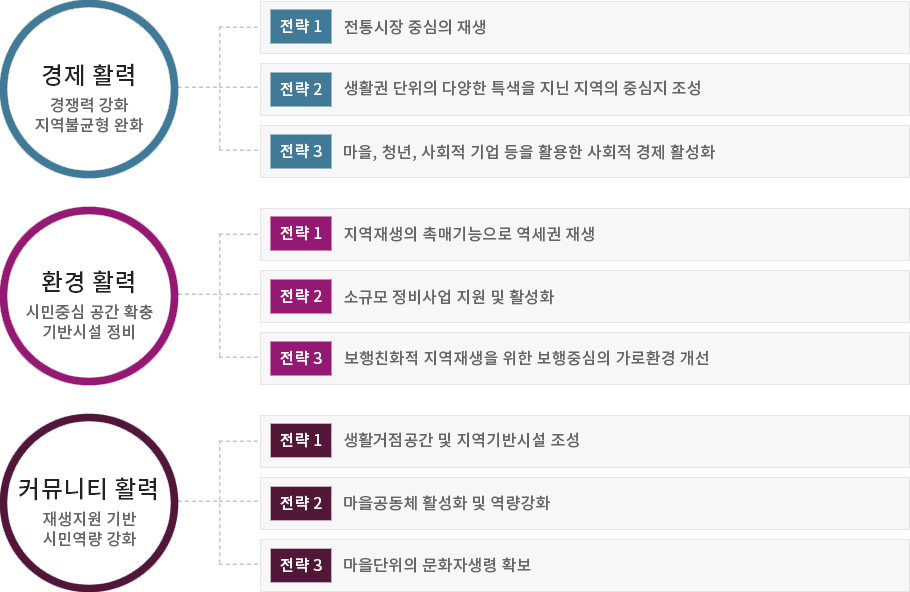
<style>
.page{position:relative;width:910px;height:592px;background:#f7f7f7}
.page>*{position:absolute;margin:0}
.t1{font:16px "NotoSansKR-Medium";letter-spacing:0.02em;color:#ffffff}
.t2{font:16px "NotoSansKR-Medium";letter-spacing:0.02em;color:#666666}
.t3{font:24px "NotoSansKR-Medium";letter-spacing:0.02em;color:#232323}
.t4{font:16px/20px "NotoSansKR-Medium";letter-spacing:0.02em;color:#666666}
.t5{font:24.2px "NotoSansKR-Medium";letter-spacing:0.02em;color:#232323}
.t6{font:16.1px/20.1px "NotoSansKR-Medium";letter-spacing:0.02em;color:#666666}
</style>
<div class="page">
<p class="t1" style="left:280px;top:18px;width:42px;height:16px">전략 1</p>
<p class="t2" style="left:344px;top:19px;width:142px;height:16px">전통시장 중심의 재생</p>
<p class="t3" style="left:42px;top:63px;width:92px;height:24px">경제 활력</p>
<p class="t1" style="left:280px;top:81px;width:42px;height:16px">전략 2</p>
<p class="t2" style="left:344px;top:80px;width:356px;height:16px">생활권 단위의 다양한 특색을 지닌 지역의 중심지 조성</p>
<p class="t4" style="left:35px;top:97px;width:109px;height:36px;text-align:center">경쟁력 강화<br>지역불균형 완화</p>
<p class="t1" style="left:280px;top:143px;width:42px;height:16px">전략 3</p>
<p class="t2" style="left:344px;top:144px;width:371px;height:18px">마을, 청년, 사회적 기업 등을 활용한 사회적 경제 활성화</p>
<p class="t1" style="left:280px;top:225px;width:42px;height:16px">전략 1</p>
<p class="t2" style="left:344px;top:226px;width:250px;height:16px">지역재생의 촉매기능으로 역세권 재생</p>
<p class="t5" style="left:42px;top:270px;width:92px;height:24px">환경 활력</p>
<p class="t1" style="left:280px;top:288px;width:42px;height:16px">전략 2</p>
<p class="t2" style="left:344px;top:289px;width:210px;height:16px">소규모 정비사업 지원 및 활성화</p>
<p class="t6" style="left:26px;top:304px;width:127px;height:36px;text-align:center">시민중심 공간 확충<br>기반시설 정비</p>
<p class="t1" style="left:280px;top:350px;width:42px;height:16px">전략 3</p>
<p class="t2" style="left:344px;top:350px;width:365px;height:16px">보행친화적 지역재생을 위한 보행중심의 가로환경 개선</p>
<p class="t1" style="left:280px;top:432px;width:42px;height:16px">전략 1</p>
<p class="t2" style="left:344px;top:432px;width:235px;height:16px">생활거점공간 및 지역기반시설 조성</p>
<p class="t5" style="left:19px;top:477px;width:137px;height:24px">커뮤니티 활력</p>
<p class="t1" style="left:280px;top:495px;width:42px;height:16px">전략 2</p>
<p class="t2" style="left:344px;top:495px;width:206px;height:16px">마을공동체 활성화 및 역량강화</p>
<p class="t6" style="left:43px;top:511px;width:93px;height:36px;text-align:center">재생지원 기반<br>시민역량 강화</p>
<p class="t1" style="left:280px;top:557px;width:42px;height:16px">전략 3</p>
<p class="t2" style="left:344px;top:557px;width:187px;height:16px">마을단위의 문화자생령 확보</p>
</div>
